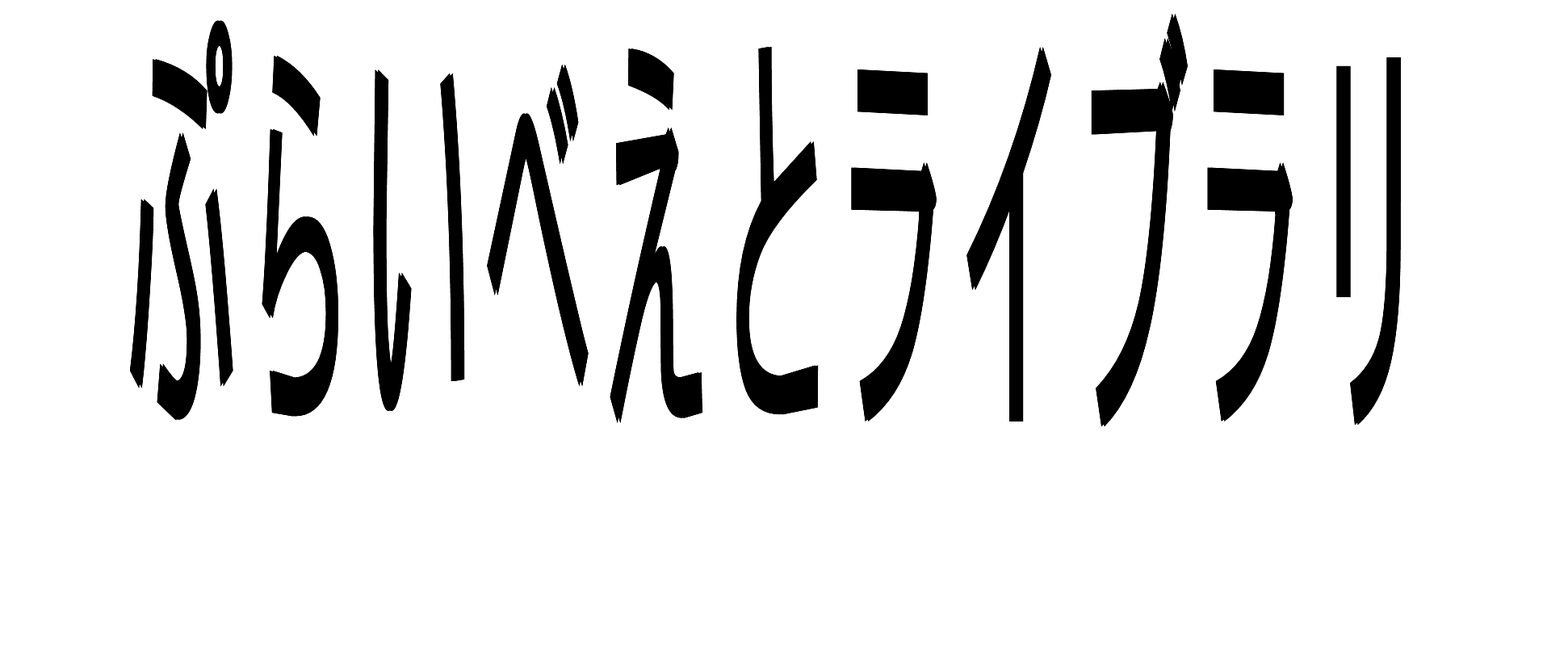
<style>
.page{position:relative;width:1568px;height:646px;background:#ffffff}
.page>*{position:absolute;margin:0}
.t1{font:448px "DroidSansFallback";color:#000000;font-weight:bold;scale:0.25 1}
</style>
<div class="page">
<p class="t1" style="left:129px;top:13px;width:1273px;height:414px">ぷらいべえとライブラリ</p>
</div>
